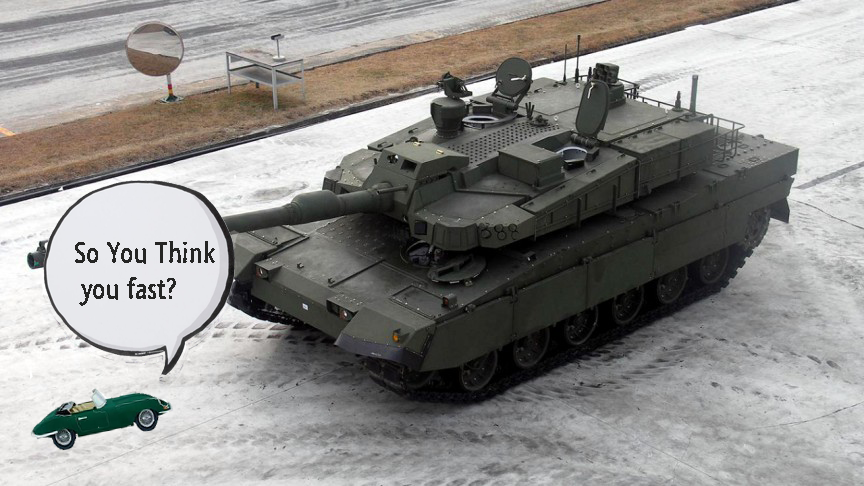
<style>
.page{position:relative;width:864px;height:486px}
.page>*{position:absolute;margin:0}
.t1{font:30px "SegoeMarker";color:#252524}
</style>
<div class="page">
<p class="t1" style="left:75px;top:241px;width:140px;height:65px">So You Think<br> you fast?</p>
</div>
